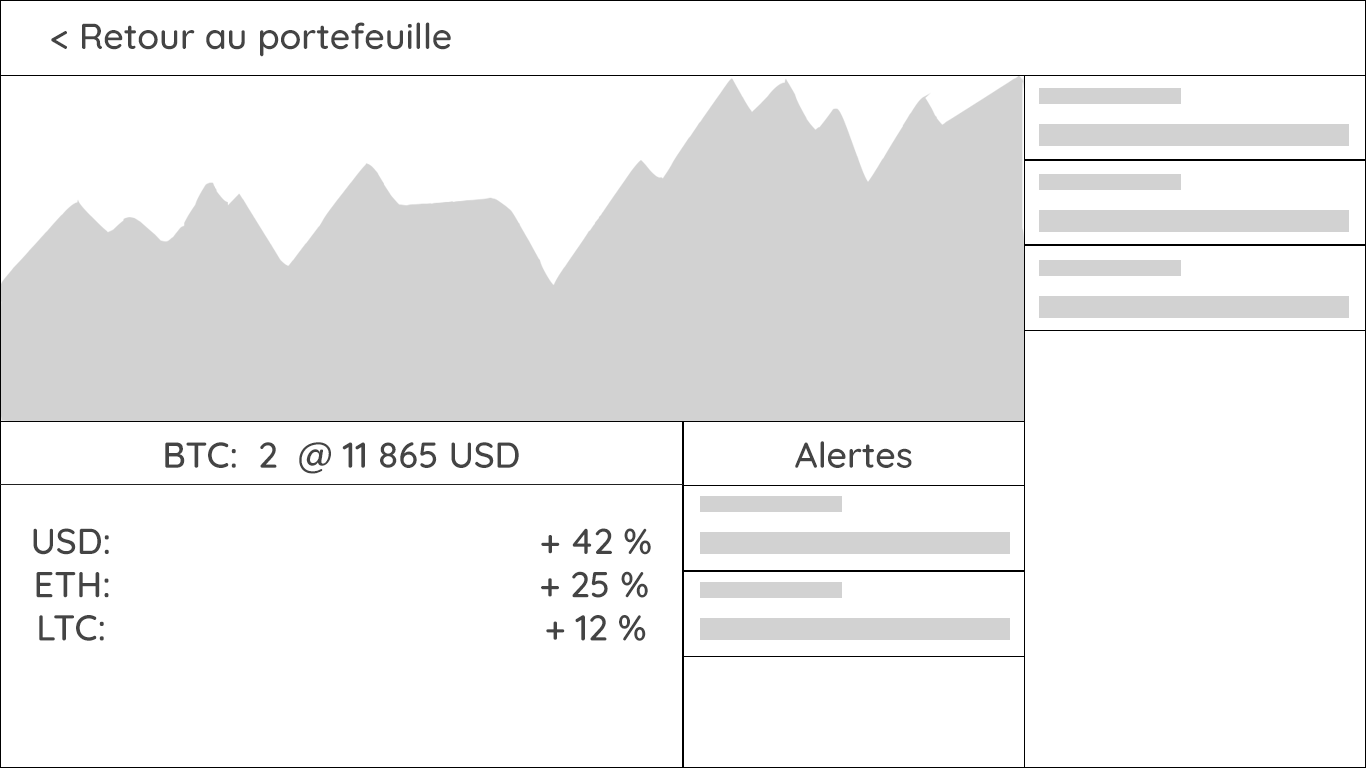
<style>
.page{position:relative;width:1366px;height:768px;background:#ffffff}
.page>*{position:absolute;margin:0}
.t1{font:36px "Quicksand-Medium";color:#444444}
</style>
<div class="page">
<p class="t1" style="left:51px;top:22px;width:400px;height:35px">&lt; Retour au portefeuille</p>
<p class="t1" style="left:33px;top:442px;width:618px;height:199px;text-align:center">BTC:  2  @ 11 865 USD<br><br>USD:                                           + 42 %<br>ETH:                                           + 25 %<br>LTC:                                            + 12 %</p>
<p class="t1" style="left:795px;top:441px;width:117px;height:27px">Alertes</p>
</div>
